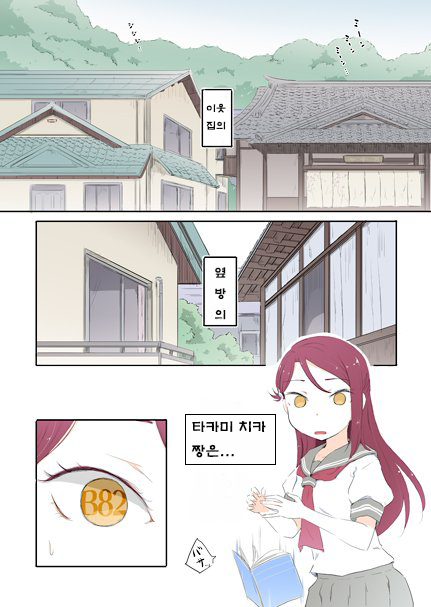
<style>
.page{position:relative;width:431px;height:607px;background:#ffffff}
.page>*{position:absolute;margin:0}
.t1{font:10px "H2mkpB";color:#060606}
.t2{font:12px "H2mkpB";color:#060606}
.t3{font:14px "H2mkpB";color:#060606}
</style>
<div class="page">
<p class="t1" style="left:206px;top:103px;width:20px;height:27px">이웃<br>집의</p>
<p class="t2" style="left:215px;top:267px;width:11px;height:53px">옆<br>방<br>의</p>
<p class="t3" style="left:191px;top:421px;width:75px;height:37px">타카미 치카<br>짱은...</p>
</div>
